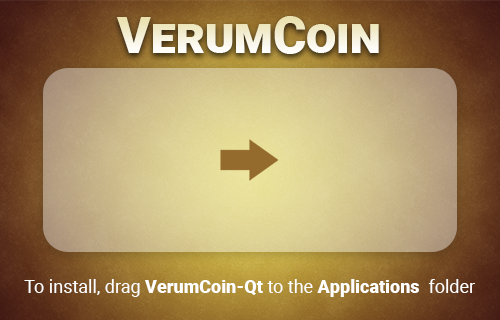
<style>
.page{position:relative;width:500px;height:320px}
.page>*{position:absolute;margin:0}
.t1{font:51.1px "Roboto-Black";font-variant:small-caps}
.t2{font:18px "Roboto-Regular";color:#ffffff}
.t3{font:18px "Roboto-Black";color:#ffffff}
</style>
<div class="page">
<p class="t1" style="left:116px;top:16px;width:263px;height:38px">VerumCoin</p>
<p class="t2" style="left:24px;top:279px;width:451px;height:18px">To install, drag <span class="t3">VerumCoin-Qt</span> to the <span class="t3">Applications </span> folder</p>
</div>
